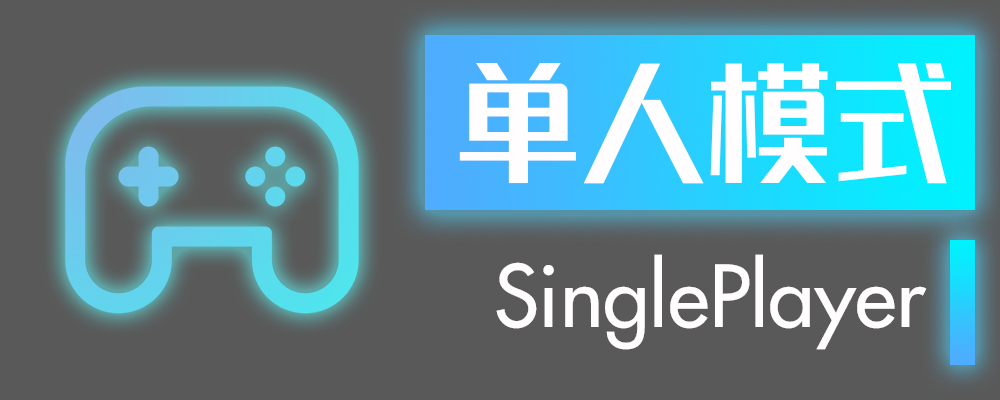
<style>
.page{position:relative;width:1000px;height:400px;background:#595959}
.page>*{position:absolute;margin:0}
.t1{font:125px "REEJIZhenyanGB20GX-Medium";color:#fffdfd}
.t2{font:83.3px "Futura-Medium";color:#fffdfd}
</style>
<div class="page">
<p class="t1" style="left:459px;top:63px;width:492px;height:121px">单人模式</p>
<p class="t2" style="left:496px;top:254px;width:431px;height:96px">SinglePlayer</p>
</div>
